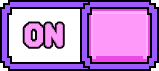
<style>
.page{position:relative;width:159px;height:71px;background:#ff99f9}
.page>*{position:absolute;margin:0}
.t1{font:26px "DNFBitBitv2";color:#ff99f9;text-transform:uppercase}
</style>
<div class="page">
<p class="t1" style="left:24px;top:23px;width:39px;height:24px">on</p>
</div>
